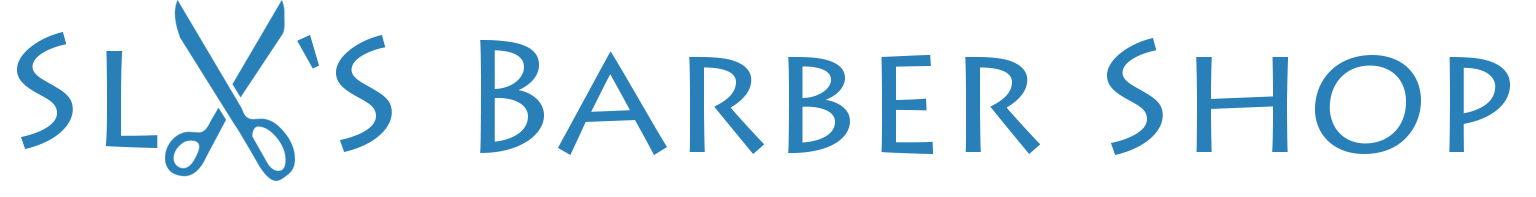
<style>
.page{position:relative;width:1536px;height:197px;background:#ffffff}
.page>*{position:absolute;margin:0}
.t1{font:160px "LithosPro-Regular";color:#2980b9}
</style>
<div class="page">
<p class="t1" style="left:17px;top:32px;width:141px;height:117px">Sl</p>
<p class="t1" style="left:297px;top:35px;width:95px;height:117px">‘S</p>
<p class="t1" style="left:480px;top:38px;width:1030px;height:117px">Barber Shop</p>
</div>
